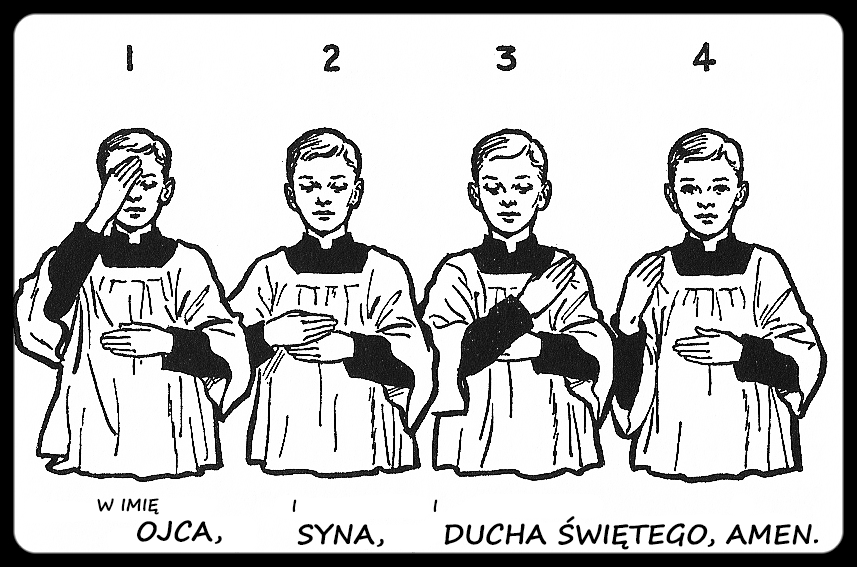
<style>
.page{position:relative;width:857px;height:567px;background:#ffffff}
.page>*{position:absolute;margin:0}
.t1{font:17px "SegoePrint-Bold";color:#000000}
.t2{font:27px "SegoePrint-Bold";color:#000000}
</style>
<div class="page">
<p class="t1" style="left:97px;top:498px;width:62px;height:17px">W IMIĘ</p>
<p class="t1" style="left:292px;top:499px;width:5px;height:13px">I</p>
<p class="t1" style="left:433px;top:499px;width:5px;height:13px">I</p>
<p class="t2" style="left:137px;top:520px;width:85px;height:24px">OJCA,</p>
<p class="t2" style="left:444px;top:516px;width:375px;height:34px">DUCHA ŚWIĘTEGO, AMEN.</p>
<p class="t2" style="left:297px;top:523px;width:87px;height:24px">SYNA,</p>
</div>
